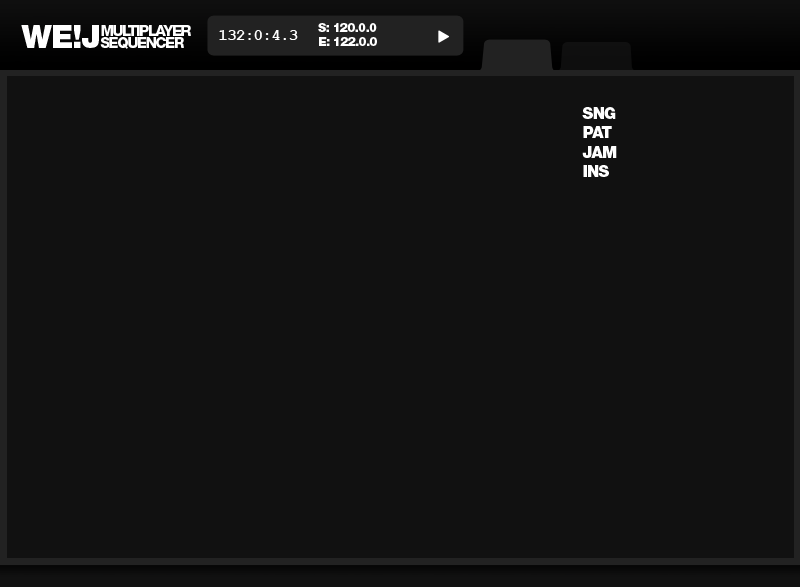
<style>
.page{position:relative;width:800px;height:587px;background:#111111}
.page>*{position:absolute;margin:0}
.t1{font:31.4px "HelveticaNeueLTStd-Blk";letter-spacing:-0.025em;color:#ffffff}
.t2{font:14.9px/12.6px "HelveticaNeueLTStd-Hv";letter-spacing:-0.1em;color:#ffffff}
.t3{font:16px "CourierNewPS-BoldMT";letter-spacing:-0.05em;color:#ffffff}
.t4{font:12px "HelveticaNeueLTStd-Blk";letter-spacing:-0.05em;color:#ffffff}
.t5{font:16px "HelveticaNeueLTStd-Blk";letter-spacing:-0.05em;color:#ffffff}
</style>
<div class="page">
<p class="t1" style="left:21px;top:25px;width:78px;height:23px">WE!J</p>
<p class="t2" style="left:100px;top:25px;width:91px;height:24px;text-align:justify">MULTIPLAYER<br>SEQUENCER</p>
<p class="t3" style="left:219px;top:30px;width:79px;height:10px">132:0:4.3</p>
<p class="t4" style="left:318px;top:23px;width:59px;height:23px">S: 120.0.0<br>E: 122.0.0</p>
<p class="t5" style="left:582px;top:107px;width:35px;height:70px">SNG<br>PAT<br>JAM<br>INS</p>
</div>
